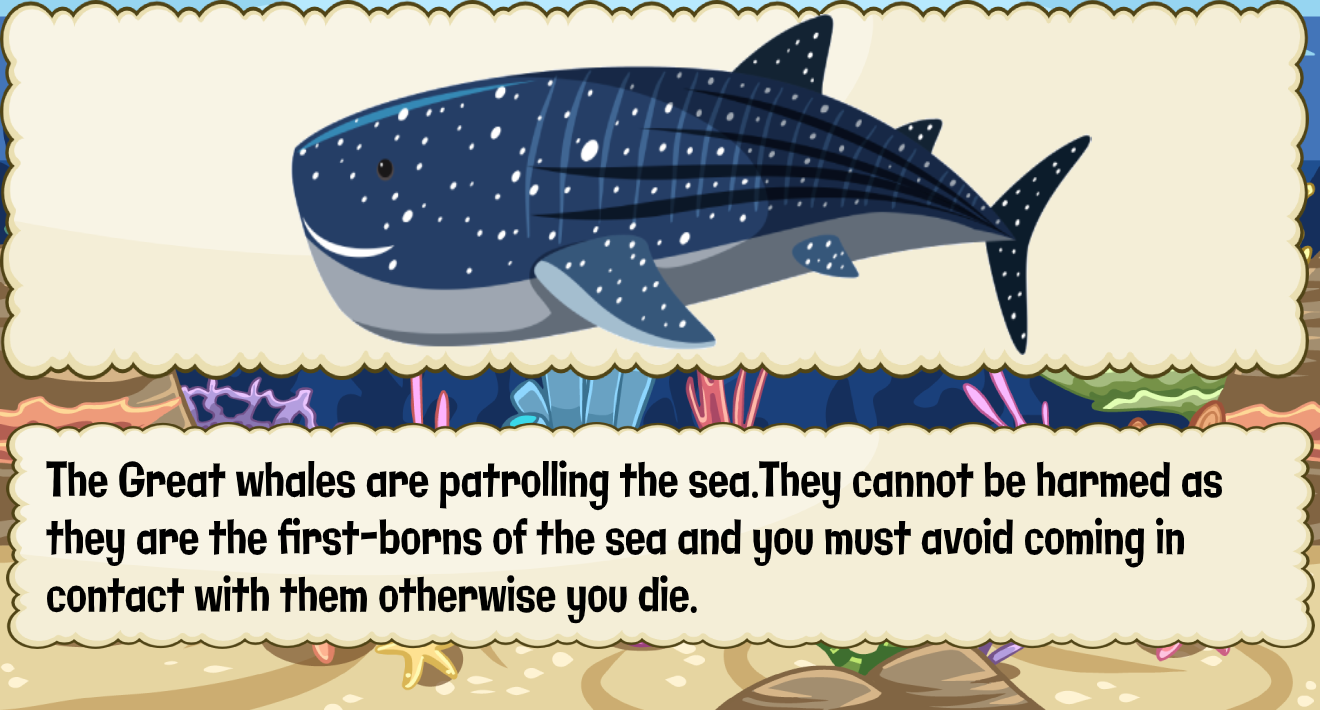
<style>
.page{position:relative;width:1320px;height:710px;background:#f4eed7}
.page>*{position:absolute;margin:0}
.t1{font:47.9px "Galindo-Regular";color:#000000;scale:0.71 1}
</style>
<div class="page">
<p class="t1" style="left:46px;top:460px;width:1177px;height:164px">The Great whales are patrolling the sea.They cannot be harmed as<br>they are the first-borns of the sea and you must avoid coming in <br>contact with them otherwise you die.</p>
</div>
